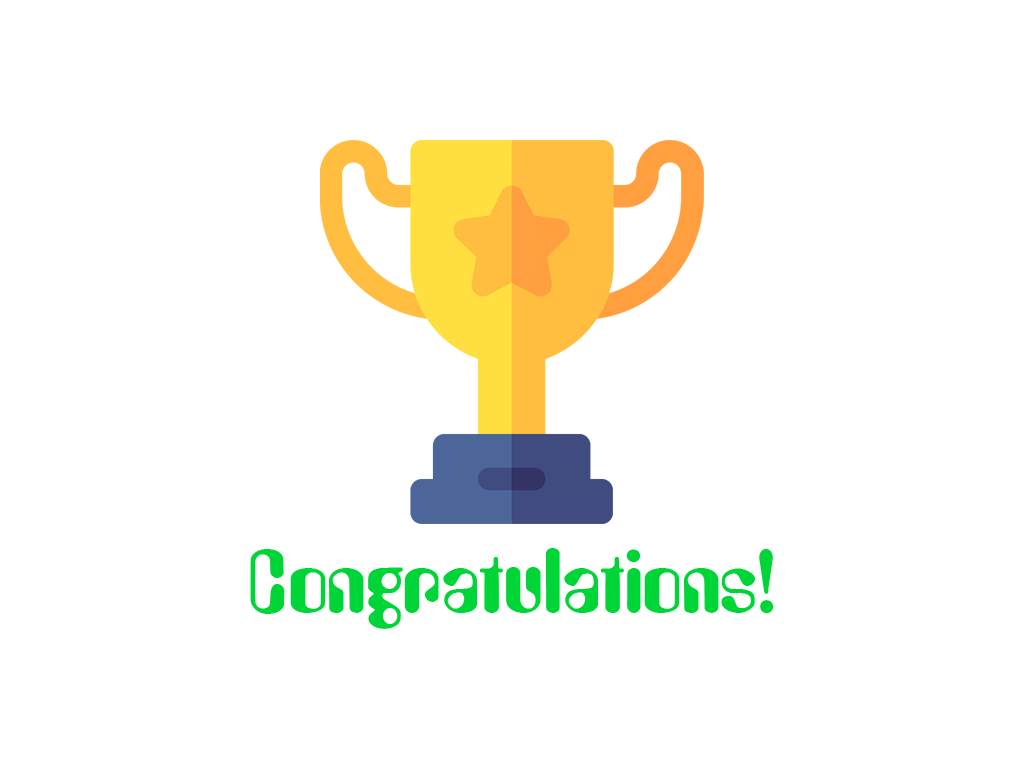
<style>
.page{position:relative;width:1024px;height:768px;background:#ffffff}
.page>*{position:absolute;margin:0}
.t1{font:80px "Asimov";color:#00d537}
</style>
<div class="page">
<p class="t1" style="left:250px;top:548px;width:523px;height:81px">Congratulations!</p>
</div>
